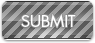
<style>
.page{position:relative;width:95px;height:43px}
.page>*{position:absolute;margin:0}
.t1{font:16px "FuturaStd-Book";color:#ffffff}
</style>
<div class="page">
<p class="t1" style="left:21px;top:14px;width:55px;height:14px">SUBMIT</p>
</div>
